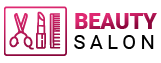
<style>
.page{position:relative;width:161px;height:63px;background:#ffffff}
.page>*{position:absolute;margin:0}
.t1{font:21.6px "Roboto-Black";text-transform:uppercase}
.t2{font:20px "Roboto-Regular";letter-spacing:0.22em;color:#000000;text-transform:uppercase}
</style>
<div class="page">
<p class="t1" style="left:75px;top:13px;width:82px;height:16px">Beauty</p>
<p class="t2" style="left:74px;top:35px;width:80px;height:14px">salon</p>
</div>
